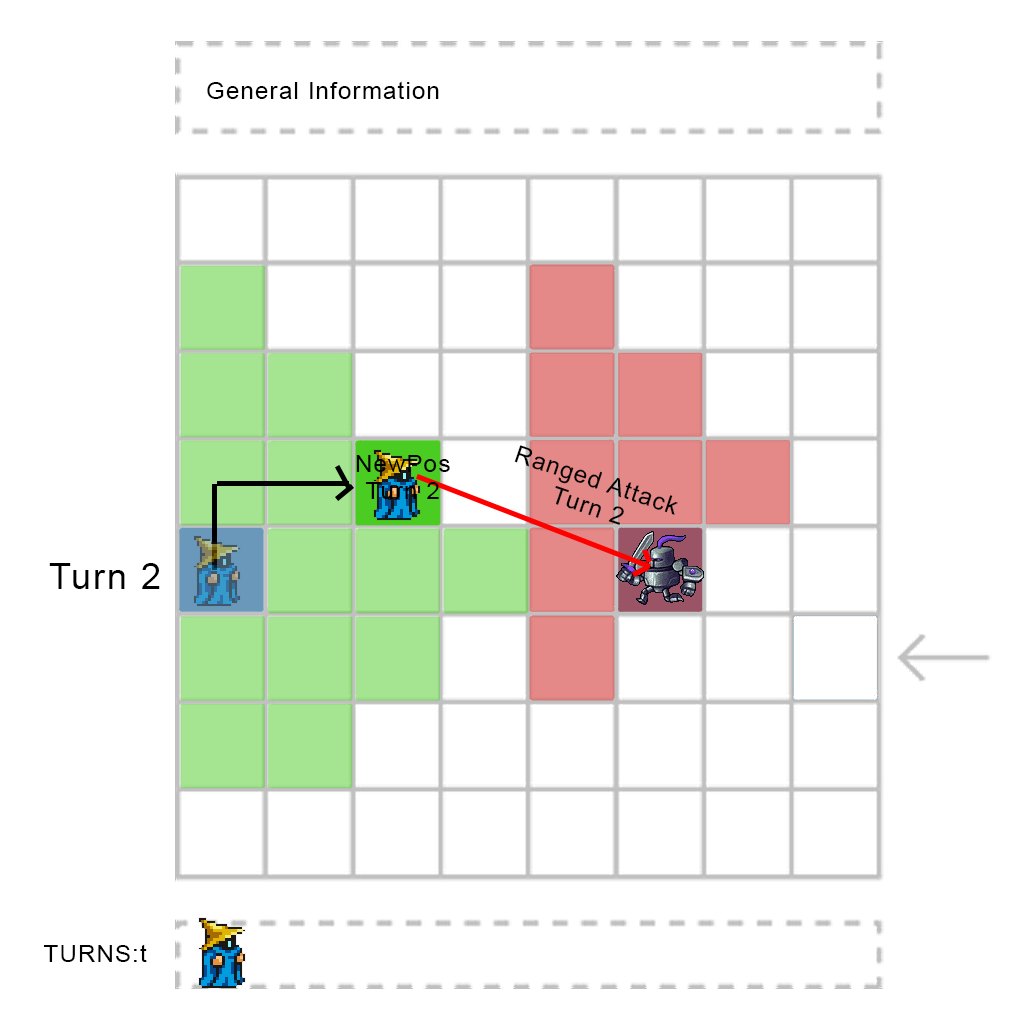
<style>
.page{position:relative;width:1024px;height:1024px;background:#ffffff}
.page>*{position:absolute;margin:0}
.t1{font:24px "ArialMT";letter-spacing:0.05em;color:#000000}
.t2{font:24px/27px "ArialMT";letter-spacing:0.05em;color:#000000}
.t3{font:36px "ArialMT";letter-spacing:0.05em;color:#000000}
</style>
<div class="page">
<p class="t1" style="left:207px;top:81px;width:232px;height:18px">General Information</p>
<p class="t2" style="left:514px;top:445px;width:164px;height:80px;text-align:center;rotate:19deg">Ranged Attack<br>Turn 2</p>
<p class="t2" style="left:356px;top:455px;width:94px;height:44px;text-align:center">NewPos<br>Turn 2</p>
<p class="t3" style="left:49px;top:563px;width:111px;height:26px">Turn 2</p>
<p class="t1" style="left:43px;top:944px;width:104px;height:18px">TURNS:t</p>
</div>
